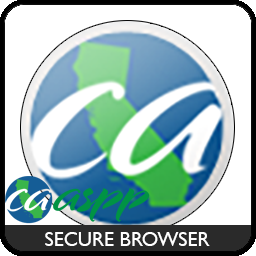
<style>
.page{position:relative;width:256px;height:256px;background:#ffffff}
.page>*{position:absolute;margin:0}
.t1{font:20px "GillSansMT";color:#ffffff}
</style>
<div class="page">
<p class="t1" style="left:45px;top:232px;width:165px;height:14px">SECURE BROWSER</p>
</div>
